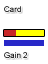
<style>
.page{position:relative;width:48px;height:64px;background:#ffffff}
.page>*{position:absolute;margin:0}
.t1{font:8px "ArialMT"}
.t2{font:8px "ArialMT";color:#000000}
</style>
<div class="page">
<p class="t1" style="left:4px;top:6px;width:17px;height:6px">Card</p>
<p class="t2" style="left:4px;top:52px;width:23px;height:6px">Gain 2</p>
</div>
